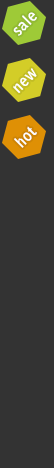
<style>
.page{position:relative;width:54px;height:468px;background:#333333}
.page>*{position:absolute;margin:0}
.t1{font:16px "BellGothicStd-Bold";letter-spacing:0.025em;color:#ffffff}
</style>
<div class="page">
<p class="t1" style="left:13px;top:12px;width:24px;height:24px;rotate:-45deg">sale</p>
<p class="t1" style="left:13px;top:68px;width:24px;height:25px;rotate:-45deg">new</p>
<p class="t1" style="left:14px;top:126px;width:23px;height:22px;rotate:-45deg">hot</p>
</div>
